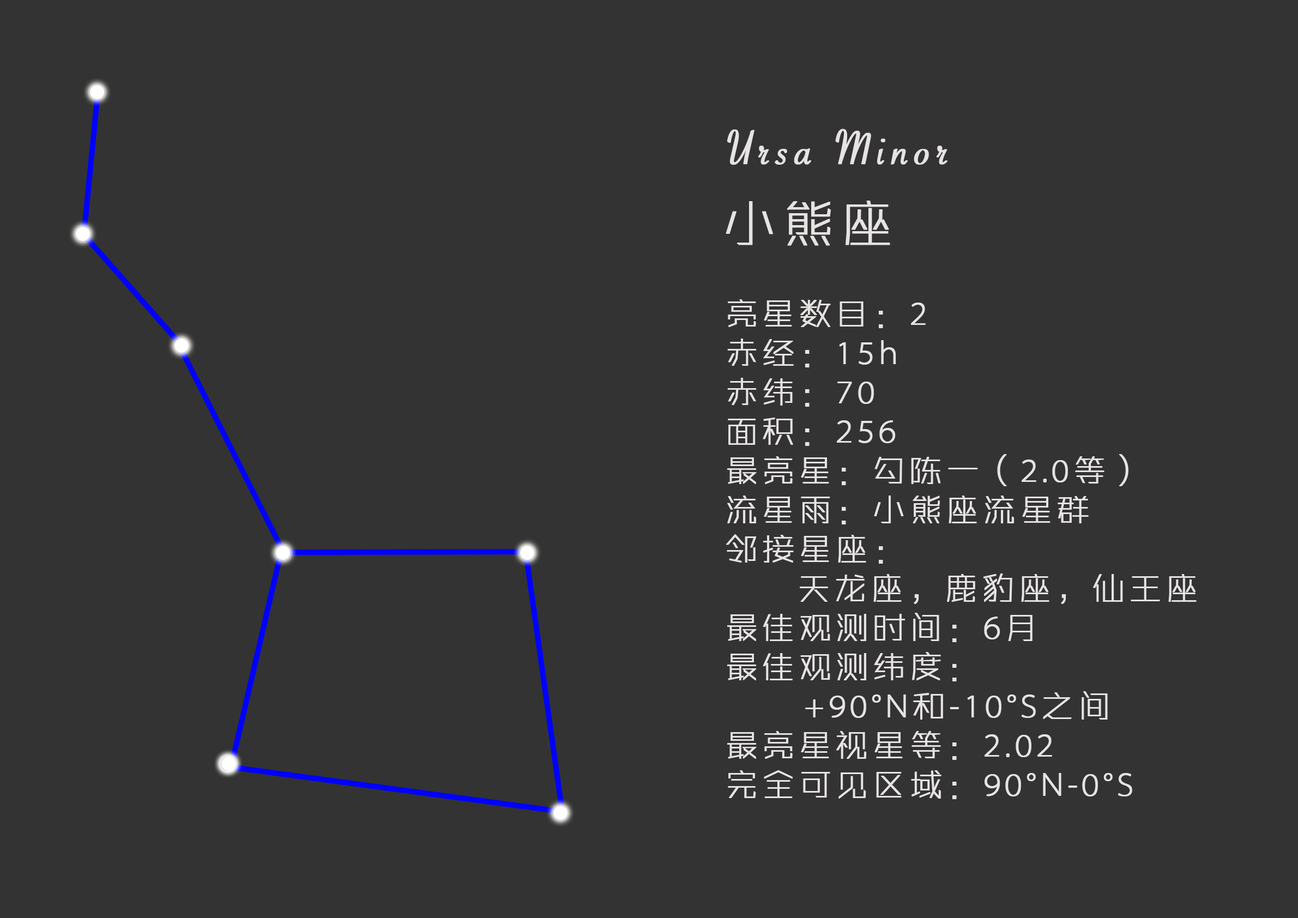
<style>
.page{position:relative;width:1298px;height:918px;background:#333333}
.page>*{position:absolute;margin:0}
.t1{font:52.4px "SavoyeLetPlain";letter-spacing:0.1em;color:#e7e3e3;font-weight:bold}
.t2{font:52.4px "ZHSRXT--GBK1-0";letter-spacing:0.1em;color:#e7e3e3;font-weight:bold}
.t3{font:32.7px "ZHSRXT--GBK1-0";letter-spacing:0.1em;color:#e7e3e3;font-weight:bold}
</style>
<div class="page">
<p class="t1" style="left:727px;top:129px;width:221px;height:36px">Ursa Minor</p>
<p class="t2" style="left:726px;top:201px;width:165px;height:45px">小熊座</p>
<p class="t3" style="left:726px;top:299px;width:471px;height:500px">亮星数目：2<br>赤经：15h<br>赤纬：70<br>面积：256<br>最亮星：勾陈一（2.0等）<br>流星雨：小熊座流星群<br>邻接星座：<br>    天龙座，鹿豹座，仙王座<br>最佳观测时间：6月<br>最佳观测纬度：<br>      +90°N和-10°S之间<br>最亮星视星等：2.02<br>完全可见区域：90°N-0°S</p>
</div>
